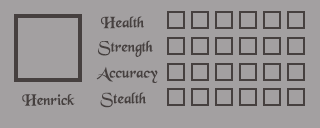
<style>
.page{position:relative;width:320px;height:128px;background:#a3a0a1}
.page>*{position:absolute;margin:0}
.t1{font:16px "BlackChancery";color:#46403f}
</style>
<div class="page">
<p class="t1" style="left:100px;top:16px;width:44px;height:13px">Health</p>
<p class="t1" style="left:98px;top:40px;width:55px;height:17px">Strength</p>
<p class="t1" style="left:96px;top:66px;width:62px;height:17px">Accuracy</p>
<p class="t1" style="left:22px;top:94px;width:53px;height:12px">Henrick</p>
<p class="t1" style="left:100px;top:92px;width:46px;height:16px">Stealth</p>
</div>
